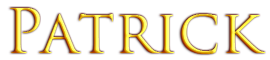
<style>
.page{position:relative;width:270px;height:60px;background:#ffffff}
.page>*{position:absolute;margin:0}
.t1{font:60px "TrajanPro-Regular"}
</style>
<div class="page">
<p class="t1" style="left:10px;top:8px;width:256px;height:46px">Patrick</p>
</div>
